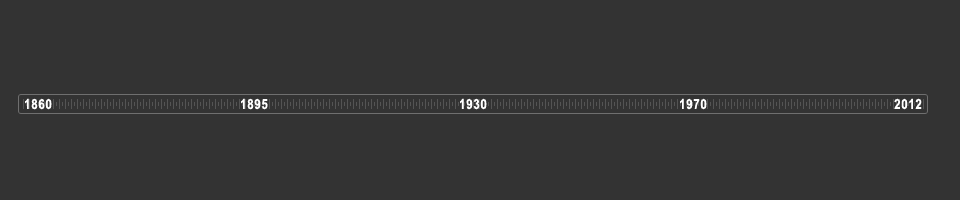
<style>
.page{position:relative;width:960px;height:200px;background:#333333}
.page>*{position:absolute;margin:0}
.t1{font:14px "ArialNarrow-Bold";letter-spacing:0.05em;color:#ffffff;text-transform:uppercase}
</style>
<div class="page">
<p class="t1" style="left:25px;top:98px;width:27px;height:12px">1860</p>
<p class="t1" style="left:241px;top:98px;width:27px;height:12px">1895</p>
<p class="t1" style="left:460px;top:98px;width:27px;height:12px">1930</p>
<p class="t1" style="left:680px;top:98px;width:27px;height:12px">1970</p>
<p class="t1" style="left:894px;top:98px;width:28px;height:12px">2012</p>
</div>
